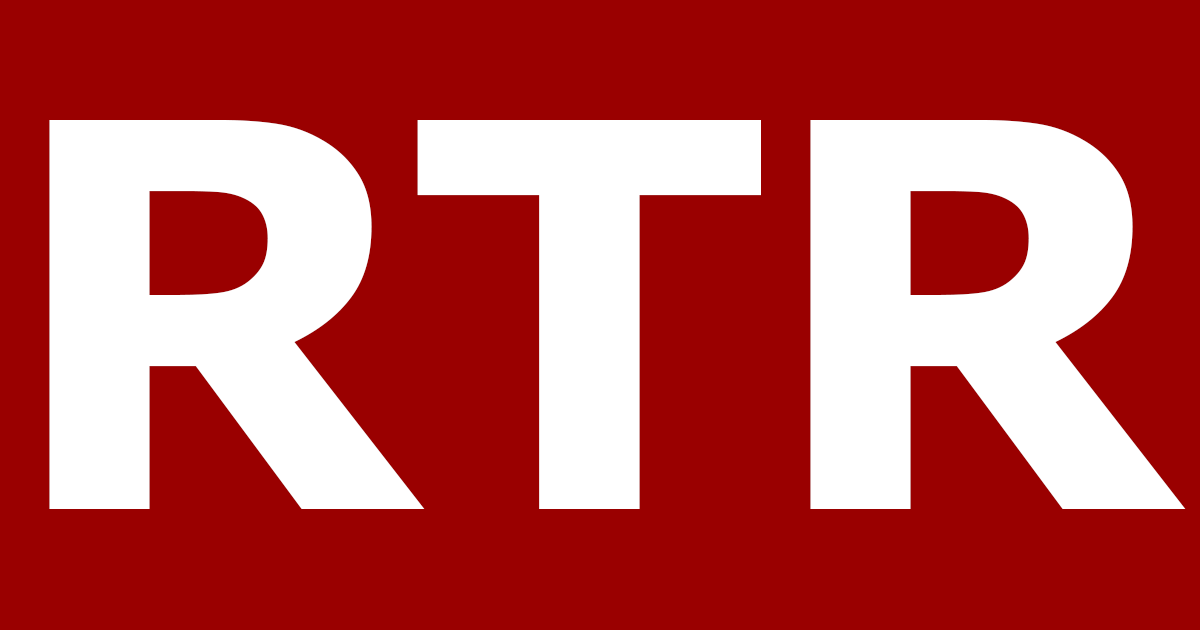
<style>
.page{position:relative;width:1200px;height:630px;background:#9a0000}
.page>*{position:absolute;margin:0}
.t1{font:534.8px "Verdana-Bold";letter-spacing:-0.02em;color:#ffffff}
</style>
<div class="page">
<p class="t1" style="left:49px;top:120px;width:1137px;height:389px">RTR</p>
</div>
